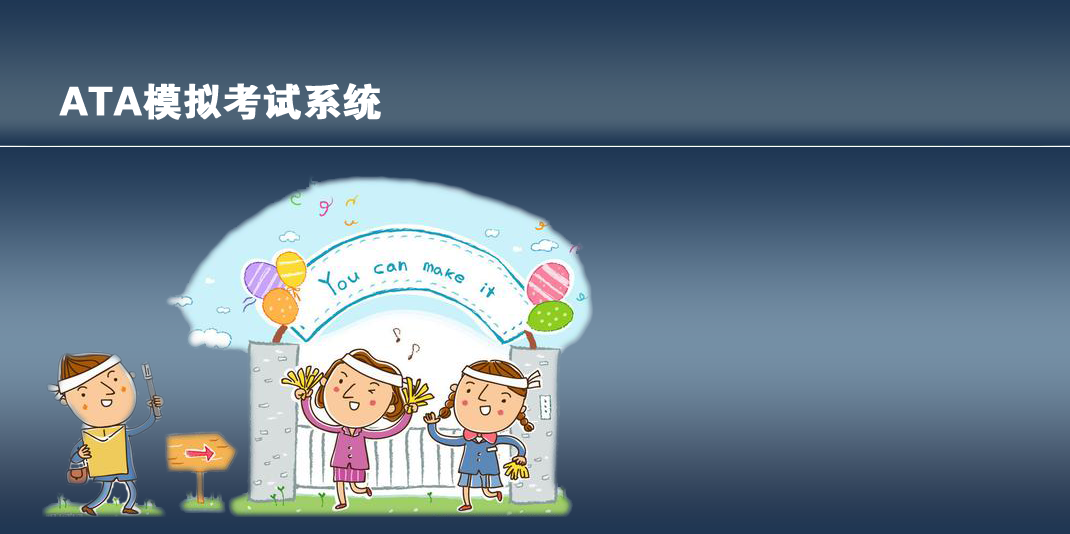
<style>
.page{position:relative;width:1070px;height:534px}
.page>*{position:absolute;margin:0}
.t1{font:39px "FZDHTJW--GB1-0";color:#ffffff;font-weight:bold}
</style>
<div class="page">
<p class="t1" style="left:59px;top:83px;width:322px;height:37px">ATA模拟考试系统</p>
</div>
